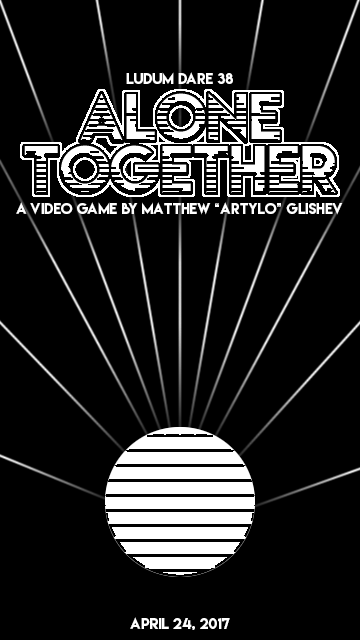
<style>
.page{position:relative;width:360px;height:640px;background:#000000}
.page>*{position:absolute;margin:0}
.t1{font:14px "LemonMilk";color:#ffffff}
</style>
<div class="page">
<p class="t1" style="left:126px;top:72px;width:107px;height:12px">LUDUM DARE 38</p>
<p class="t1" style="left:16px;top:202px;width:327px;height:13px">A video game by Matthew “Artylo” Glishev</p>
<p class="t1" style="left:130px;top:617px;width:100px;height:13px">APRIL 24, 2017</p>
</div>
